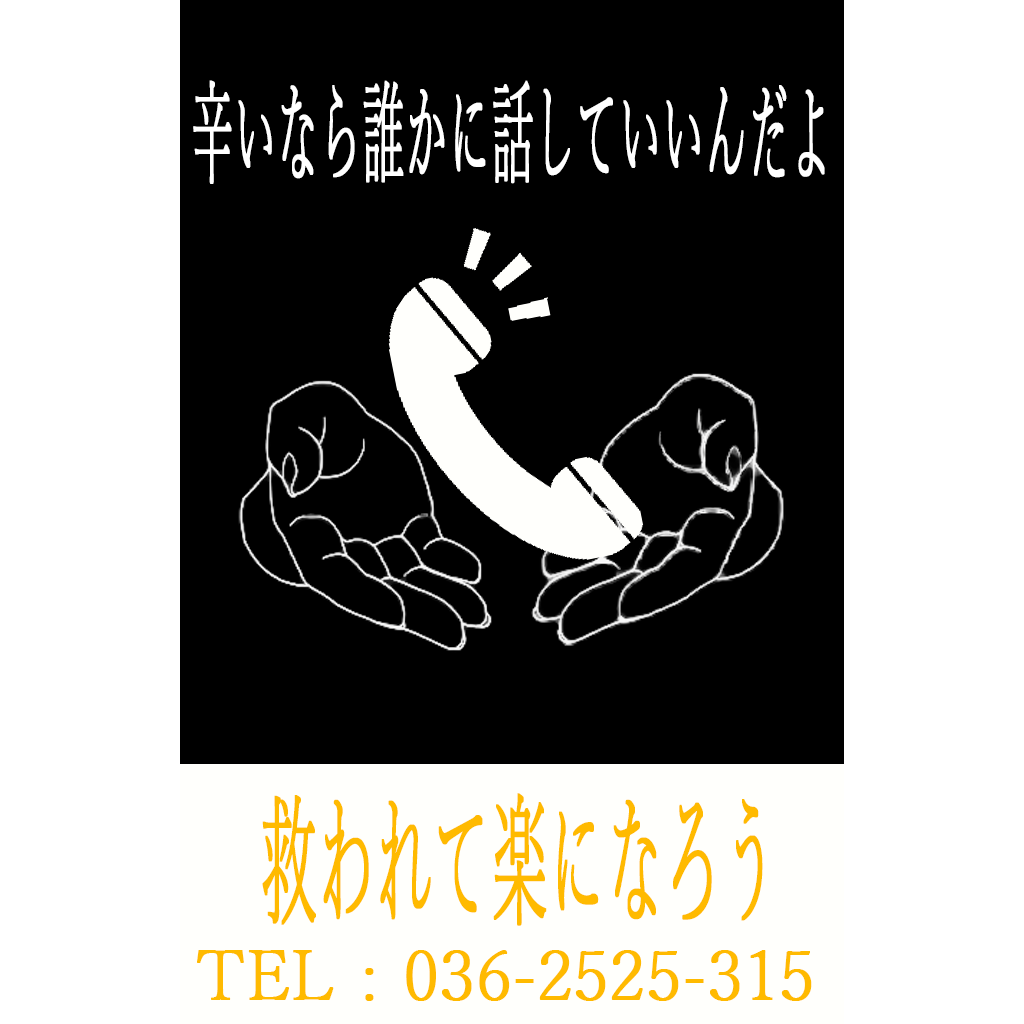
<style>
.page{position:relative;width:1024px;height:1024px;background:#000000}
.page>*{position:absolute;margin:0}
.t1{font:112.5px "YuMincho-Light";color:#ffffff;font-weight:bold;scale:0.37 1}
.t2{font:144.9px "YuMincho-Light";color:#ffba00;font-weight:bold;scale:0.39 1}
.t3{font:68.7px "YuMincho-Light";color:#ffba00;font-weight:bold}
</style>
<div class="page">
<p class="t1" style="left:193px;top:80px;width:632px;height:104px">辛いなら誰かに話していいんだよ</p>
<p class="t2" style="left:262px;top:793px;width:501px;height:133px">救われて楽になろう</p>
<p class="t3" style="left:197px;top:950px;width:615px;height:51px">TEL : 036-2525-315</p>
</div>
